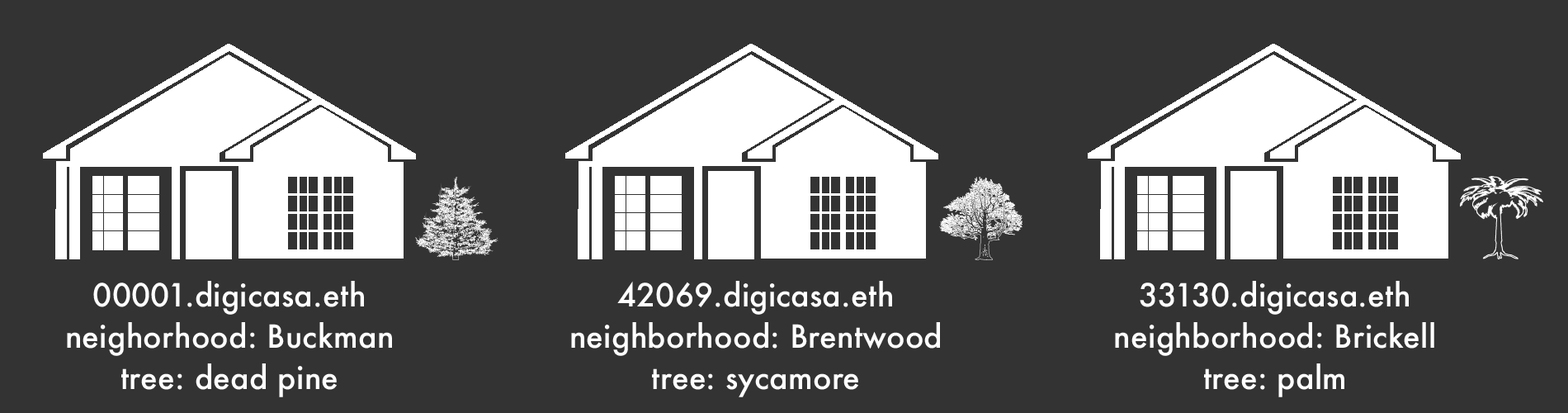
<style>
.page{position:relative;width:1568px;height:413px;background:#333333}
.page>*{position:absolute;margin:0}
.t1{font:30.9px/41.3px "Futura-Medium";letter-spacing:0.005em;color:#ffffff}
</style>
<div class="page">
<p class="t1" style="left:67px;top:281px;width:325px;height:116px;text-align:center">00001.digicasa.eth<br>neighorhood: Buckman<br>tree: dead pine</p>
<p class="t1" style="left:571px;top:281px;width:369px;height:116px;text-align:center">42069.digicasa.eth<br>neighborhood: Brentwood<br>tree: sycamore</p>
<p class="t1" style="left:1115px;top:281px;width:319px;height:116px;text-align:center">33130.digicasa.eth<br>neighborhood: Brickell<br>tree: palm</p>
</div>
